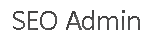
<style>
.page{position:relative;width:160px;height:40px;background:#ffffff}
.page>*{position:absolute;margin:0}
.t1{font:30px "Calibri";letter-spacing:-0.025em;color:#4b4a4a}
</style>
<div class="page">
<p class="t1" style="left:13px;top:10px;width:127px;height:20px">SEO Admin</p>
</div>
